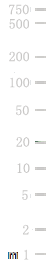
<style>
.page{position:relative;width:47px;height:264px;background:#ffffff}
.page>*{position:absolute;margin:0}
.t1{font:14px "SimSun";color:#c8c7c6}
</style>
<div class="page">
<p class="t1" style="left:9px;top:4px;width:20px;height:11px">750</p>
<p class="t1" style="left:9px;top:19px;width:20px;height:10px">500</p>
<p class="t1" style="left:9px;top:51px;width:20px;height:11px">200</p>
<p class="t1" style="left:10px;top:77px;width:20px;height:11px">100</p>
<p class="t1" style="left:16px;top:105px;width:13px;height:11px">50</p>
<p class="t1" style="left:16px;top:137px;width:14px;height:10px">20</p>
<p class="t1" style="left:17px;top:163px;width:13px;height:10px">10</p>
<p class="t1" style="left:22px;top:190px;width:6px;height:10px">5</p>
<p class="t1" style="left:23px;top:224px;width:6px;height:11px">2</p>
<p class="t1" style="left:24px;top:249px;width:5px;height:11px">1</p>
</div>
